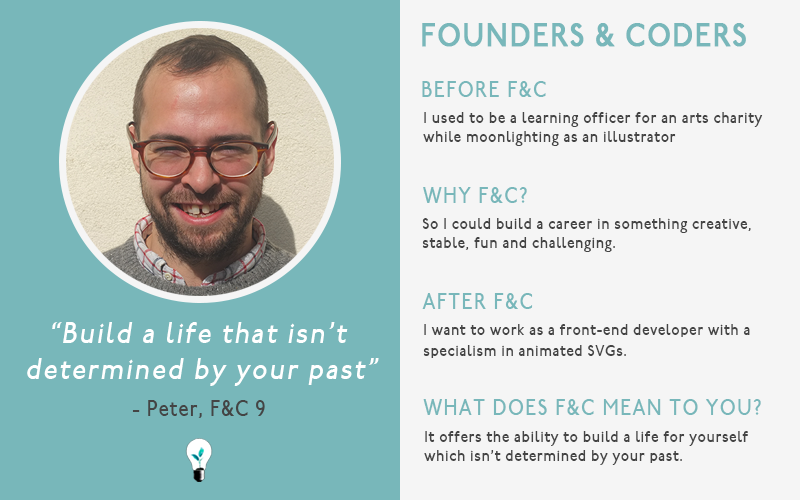
<style>
.page{position:relative;width:800px;height:500px;background:#f5f5f5}
.page>*{position:absolute;margin:0}
.t1{font:32px "P22UndergroundMedium";letter-spacing:0.05em;color:#78b7ba;font-weight:bold;scale:0.86 1}
.t2{font:22px "P22UndergroundMedium";letter-spacing:0.075em;color:#78b7ba;scale:0.86 1}
.t3{font:16px "P22UndergroundMedium";letter-spacing:0.05em;color:#444444;scale:0.86 1}
.t4{font:30px "P22UndergroundMedium";letter-spacing:0.075em;color:#ffffff;font-style:italic;scale:0.86 1}
.t5{font:22px "P22UndergroundMedium";letter-spacing:0.05em;color:#444444;scale:0.86 1}
</style>
<div class="page">
<p class="t1" style="left:422px;top:23px;width:324px;height:24px">FOUNDERS &amp; CODERS</p>
<p class="t2" style="left:422px;top:81px;width:124px;height:16px">BEFORE F&amp;C</p>
<p class="t3" style="left:423px;top:112px;width:340px;height:34px">I used to be a learning officer for an arts charity <br>while moonlighting as an illustrator</p>
<p class="t2" style="left:423px;top:187px;width:104px;height:16px">WHY F&amp;C?</p>
<p class="t3" style="left:422px;top:218px;width:329px;height:34px">So I could build a career in something creative, <br>stable, fun and challenging.</p>
<p class="t2" style="left:422px;top:293px;width:111px;height:16px">AFTER F&amp;C</p>
<p class="t4" style="left:27px;top:322px;width:352px;height:64px;text-align:center">“Build a life that isn’t <br>determined by your past”</p>
<p class="t3" style="left:423px;top:324px;width:327px;height:34px">I want to work as a front-end developer with a <br>specialism in animated SVGs.</p>
<p class="t5" style="left:132px;top:400px;width:133px;height:18px">- Peter, F&amp;C 9</p>
<p class="t2" style="left:423px;top:399px;width:338px;height:16px">WHAT DOES F&amp;C MEAN TO YOU?</p>
<p class="t3" style="left:424px;top:431px;width:324px;height:34px">It offers the ability to build a life for yourself<br>which isn’t determined by your past.</p>
</div>
